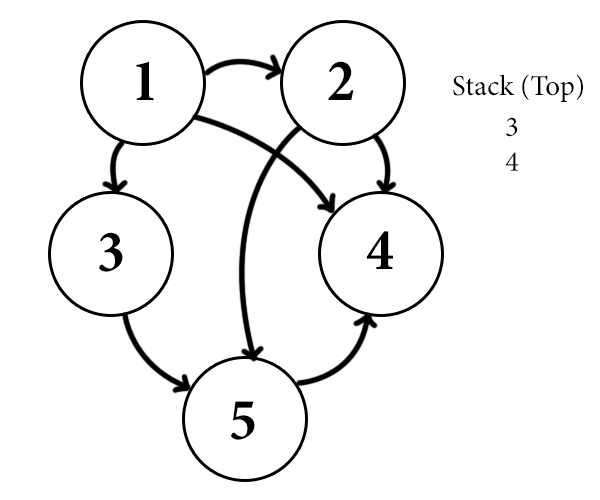
<style>
.page{position:relative;width:600px;height:500px;background:#ffffff}
.page>*{position:absolute;margin:0}
.t1{font:60px "MinionPro-BoldCn";color:#000000}
.t2{font:29px "MinionPro-Regular";color:#000000}
</style>
<div class="page">
<p class="t1" style="left:136px;top:61px;width:18px;height:39px">1</p>
<p class="t1" style="left:328px;top:61px;width:26px;height:39px">2</p>
<p class="t2" style="left:453px;top:74px;width:130px;height:28px">Stack (Top)</p>
<p class="t2" style="left:505px;top:117px;width:14px;height:54px">3<br>4</p>
<p class="t1" style="left:99px;top:232px;width:24px;height:40px">3</p>
<p class="t1" style="left:366px;top:231px;width:27px;height:38px">4</p>
<p class="t1" style="left:231px;top:401px;width:24px;height:39px">5</p>
</div>
